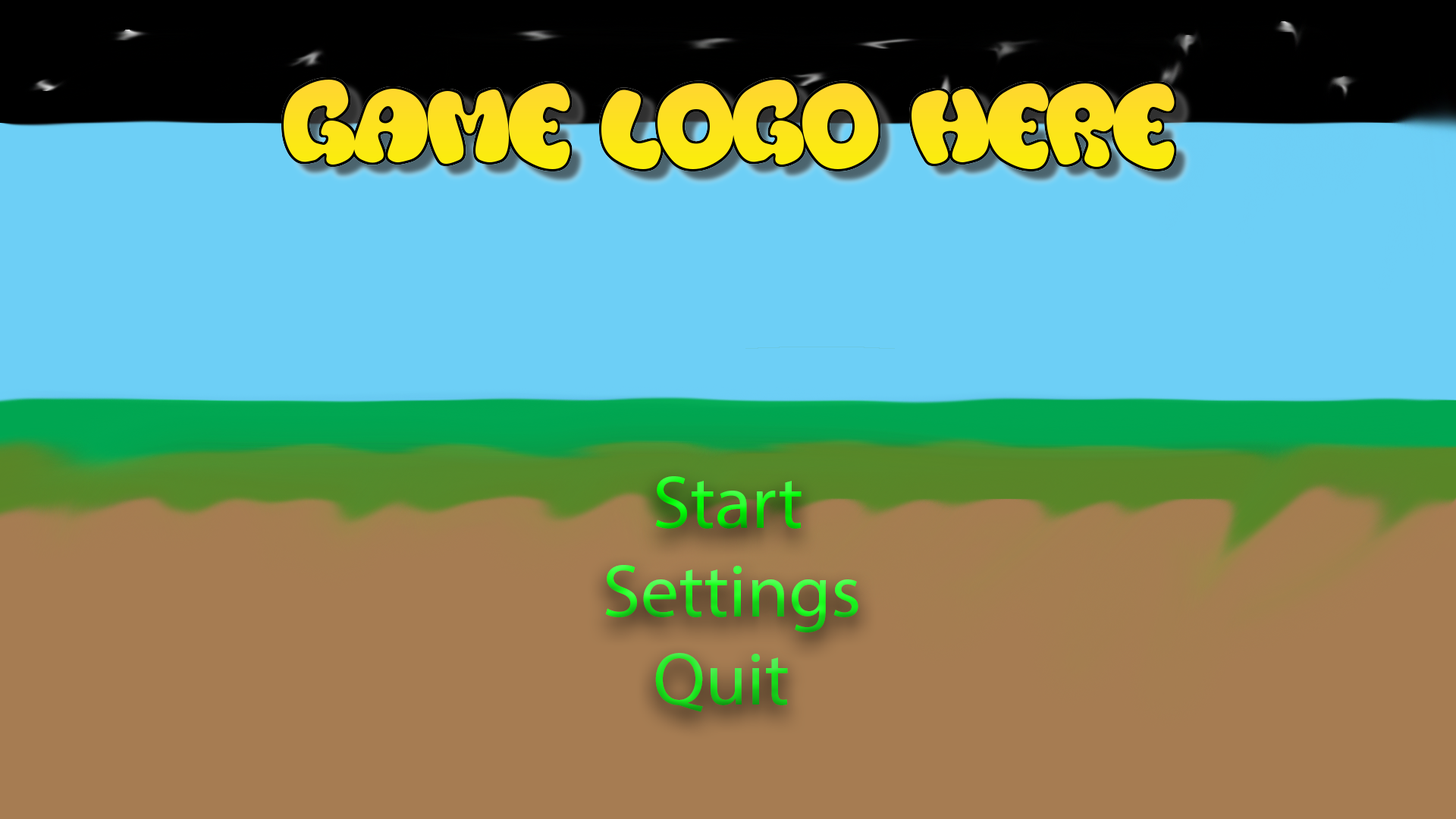
<style>
.page{position:relative;width:1456px;height:819px;background:#6dcff6}
.page>*{position:absolute;margin:0}
.t1{font:75.8px "MyriadPro-Regular"}
</style>
<div class="page">
<p class="t1" style="left:655px;top:476px;width:147px;height:53px">Start</p>
<p class="t1" style="left:605px;top:565px;width:253px;height:67px">Settings</p>
<p class="t1" style="left:655px;top:653px;width:133px;height:59px">Quit</p>
</div>
